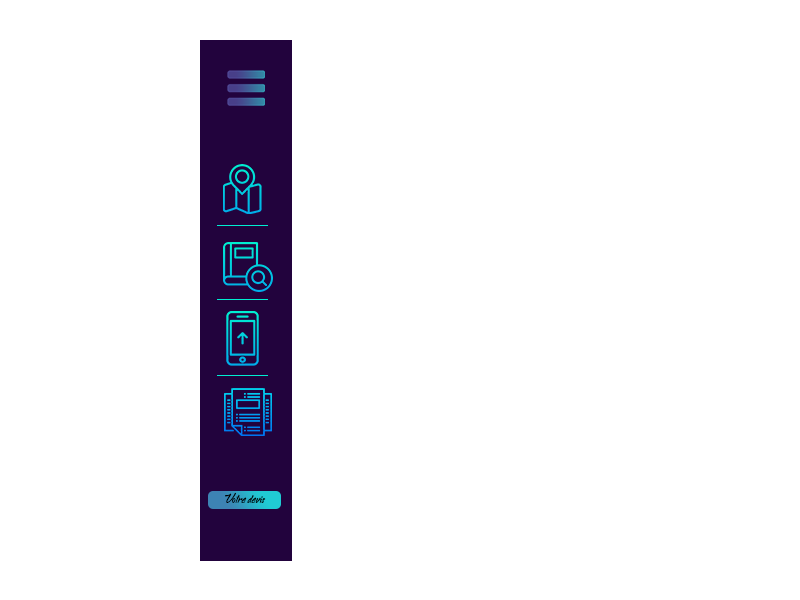
<style>
.page{position:relative;width:800px;height:600px;background:#ffffff}
.page>*{position:absolute;margin:0}
.t1{font:10px "Bethsy";color:#000000}
</style>
<div class="page">
<p class="t1" style="left:225px;top:492px;width:41px;height:11px">Votre devis</p>
</div>
